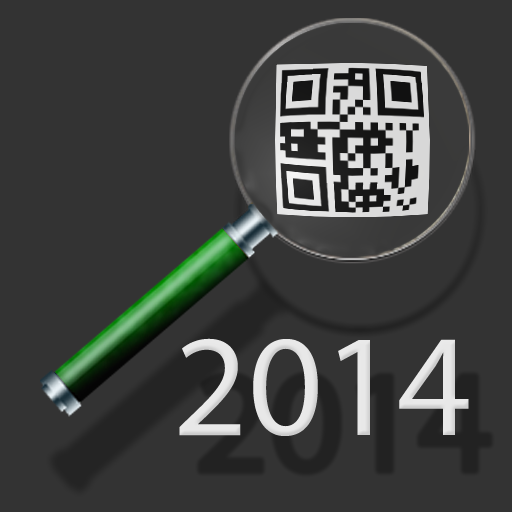
<style>
.page{position:relative;width:512px;height:512px;background:#333333}
.page>*{position:absolute;margin:0}
.t1{font:145.8px "MyriadPro-Regular";color:#e8e8e8}
</style>
<div class="page">
<p class="t1" style="left:179px;top:338px;width:290px;height:98px">2014</p>
</div>
